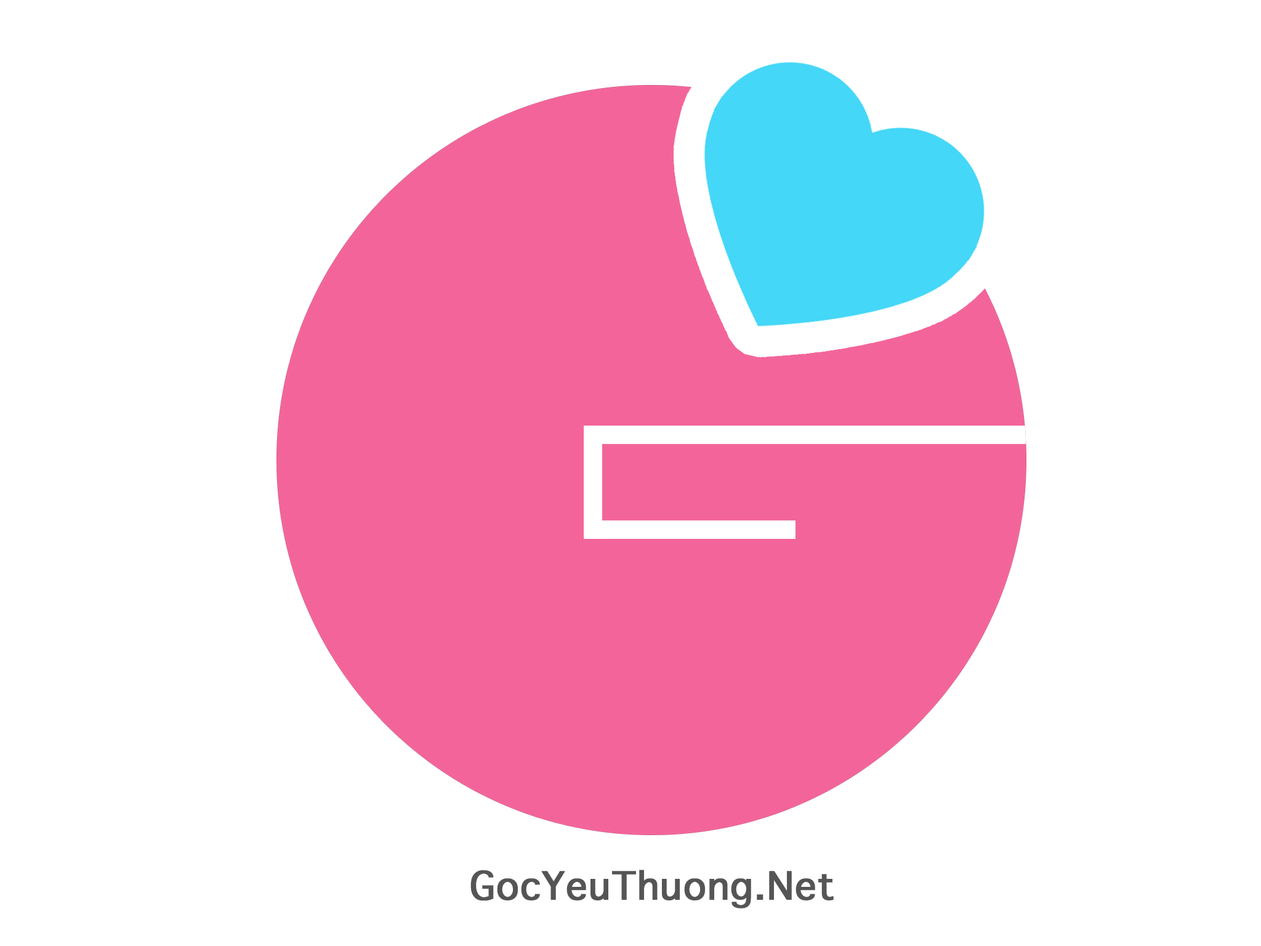
<style>
.page{position:relative;width:1261px;height:946px;background:#ffffff}
.page>*{position:absolute;margin:0}
.t1{font:52.3px "AppleSymbols";color:#555555;font-weight:bold}
</style>
<div class="page">
<p class="t1" style="left:470px;top:869px;width:364px;height:39px">GocYeuThuong.Net</p>
</div>
